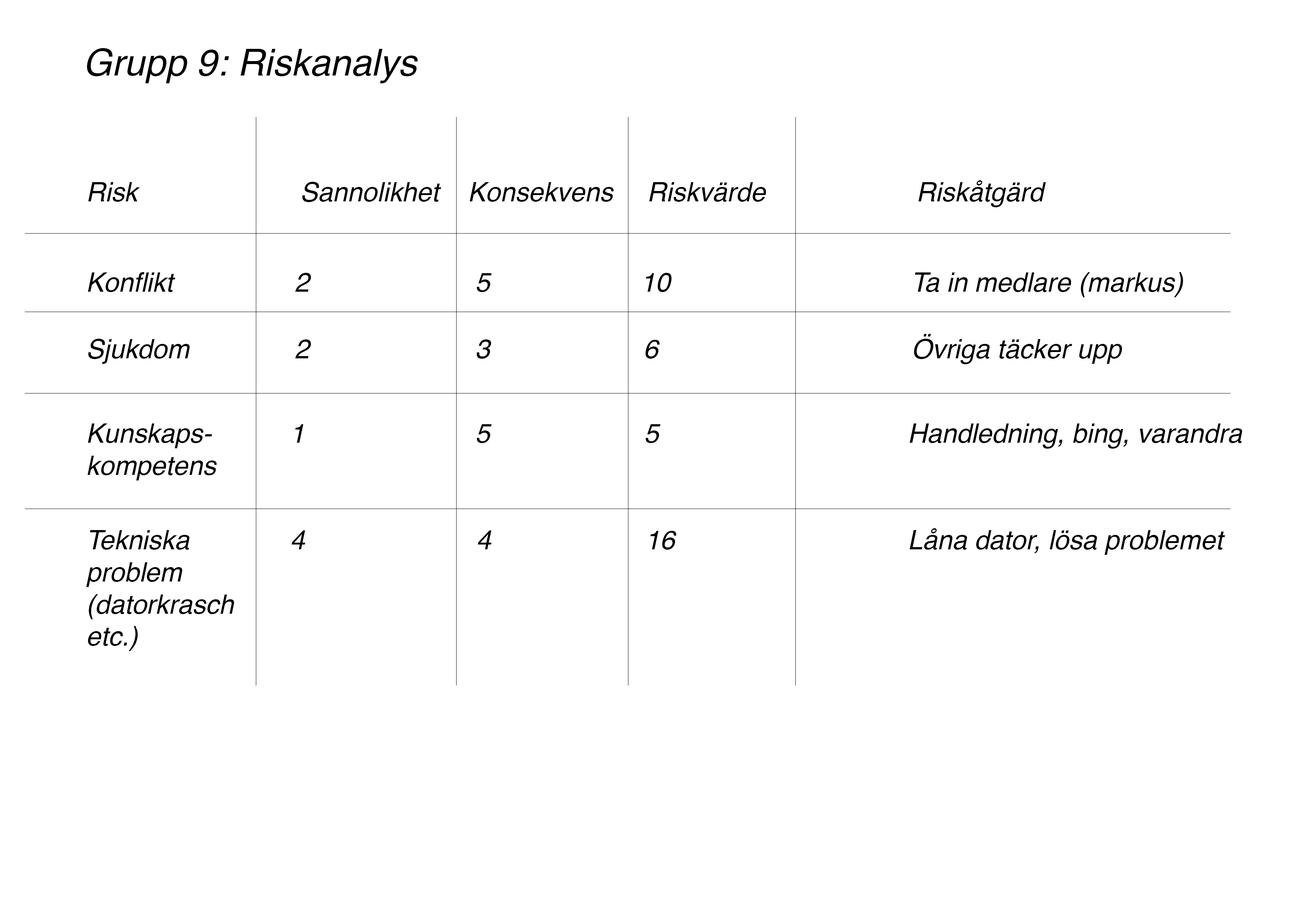
<style>
.page{position:relative;width:1299px;height:918px;background:#ffffff}
.page>*{position:absolute;margin:0}
.t1{font:37px "Helvetica-Oblique";color:#000000}
.t2{font:26.8px "Helvetica-Oblique";color:#000000}
</style>
<div class="page">
<p class="t1" style="left:87px;top:48px;width:331px;height:35px">Grupp 9: Riskanalys</p>
<p class="t2" style="left:88px;top:182px;width:52px;height:20px">Risk</p>
<p class="t2" style="left:302px;top:182px;width:139px;height:20px">Sannolikhet</p>
<p class="t2" style="left:469px;top:182px;width:144px;height:20px">Konsekvens</p>
<p class="t2" style="left:649px;top:182px;width:117px;height:20px">Riskvärde</p>
<p class="t2" style="left:918px;top:180px;width:128px;height:27px">Riskåtgärd</p>
<p class="t2" style="left:88px;top:272px;width:87px;height:20px">Konflikt</p>
<p class="t2" style="left:295px;top:273px;width:16px;height:19px">2</p>
<p class="t2" style="left:476px;top:273px;width:16px;height:19px">5</p>
<p class="t2" style="left:646px;top:273px;width:26px;height:19px">10</p>
<p class="t2" style="left:914px;top:272px;width:269px;height:25px">Ta in medlare (markus)</p>
<p class="t2" style="left:88px;top:339px;width:102px;height:25px">Sjukdom</p>
<p class="t2" style="left:295px;top:339px;width:16px;height:19px">2</p>
<p class="t2" style="left:476px;top:339px;width:15px;height:20px">3</p>
<p class="t2" style="left:645px;top:340px;width:15px;height:19px">6</p>
<p class="t2" style="left:914px;top:334px;width:208px;height:30px">Övriga täcker upp</p>
<p class="t2" style="left:87px;top:424px;width:130px;height:57px">Kunskaps-<br>kompetens</p>
<p class="t2" style="left:295px;top:424px;width:8px;height:19px">1</p>
<p class="t2" style="left:476px;top:424px;width:16px;height:19px">5</p>
<p class="t2" style="left:645px;top:424px;width:15px;height:19px">5</p>
<p class="t2" style="left:909px;top:424px;width:333px;height:25px">Handledning, bing, varandra</p>
<p class="t2" style="left:86px;top:530px;width:148px;height:121px">Tekniska <br>problem<br>(datorkrasch <br>etc.)</p>
<p class="t2" style="left:291px;top:531px;width:14px;height:18px">4</p>
<p class="t2" style="left:478px;top:531px;width:14px;height:18px">4</p>
<p class="t2" style="left:650px;top:531px;width:26px;height:19px">16</p>
<p class="t2" style="left:909px;top:528px;width:316px;height:27px">Låna dator, lösa problemet</p>
</div>
